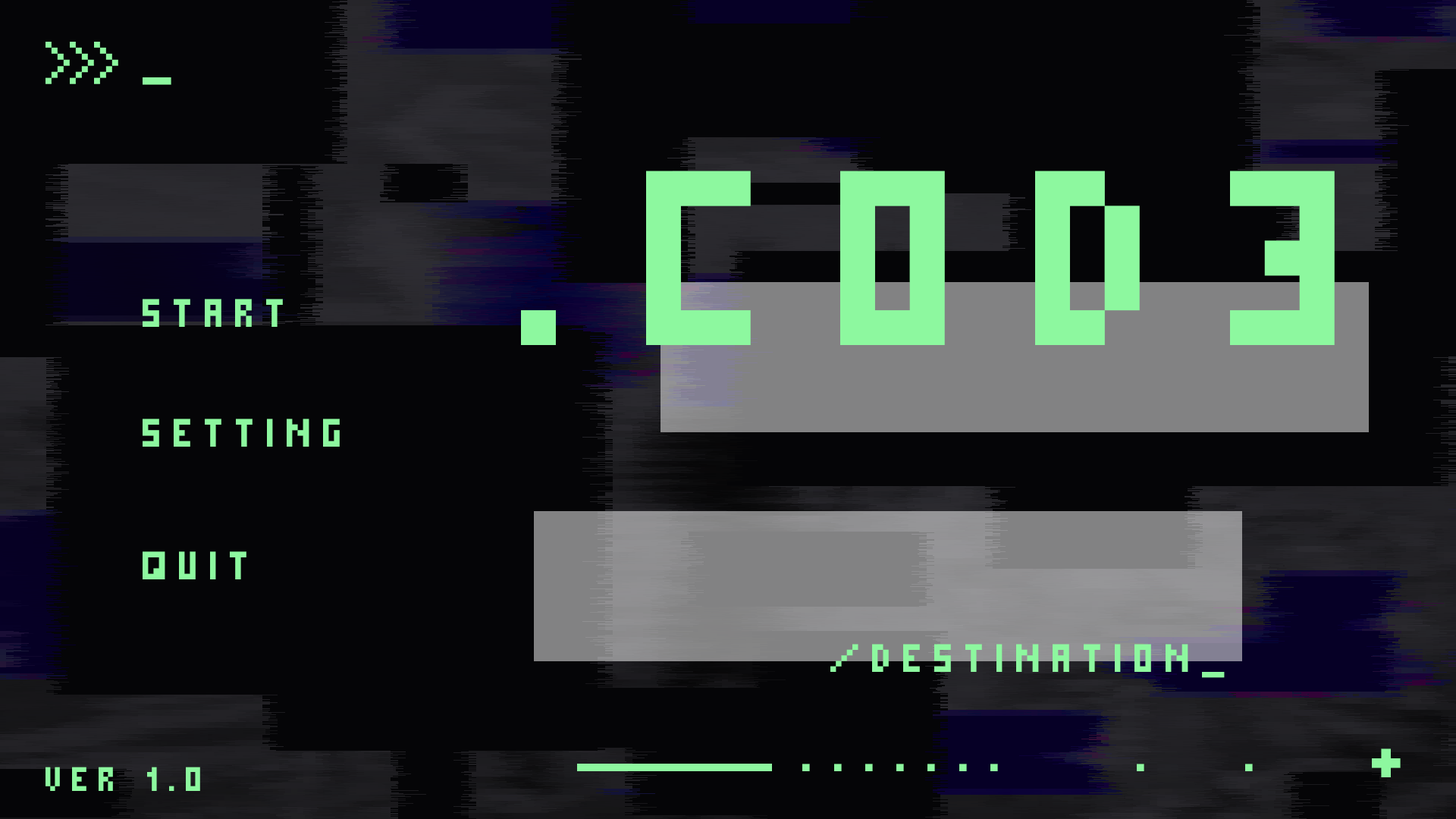
<style>
.page{position:relative;width:1456px;height:819px;background:#050507}
.page>*{position:absolute;margin:0}
.t1{font:56.9px "PixelMillennium";letter-spacing:0.2em;color:#8df89f}
.t2{font:278.1px "PixelMillennium";letter-spacing:0.2em;color:#8df89f}
.t3{font:44.2px "PixelMillennium";letter-spacing:0.2em;color:#8df89f}
.t4{font:75.8px "PixelMillennium";letter-spacing:0.2em;color:#8df89f}
.t5{font:37.9px "PixelMillennium";letter-spacing:0.2em;color:#8df89f}
.t6{font:56.9px "PixelMillennium";letter-spacing:0.3em;color:#8df89f}
</style>
<div class="page">
<p class="t1" style="left:143px;top:77px;width:28px;height:8px">_</p>
<p class="t2" style="left:521px;top:171px;width:814px;height:174px">.C0D3</p>
<p class="t3" style="left:143px;top:299px;width:140px;height:28px">START</p>
<p class="t3" style="left:143px;top:419px;width:197px;height:28px">SETTING</p>
<p class="t3" style="left:143px;top:551px;width:103px;height:28px">QUIT</p>
<p class="t3" style="left:830px;top:644px;width:395px;height:34px">/DESTINATION_</p>
<p class="t4" style="left:1372px;top:748px;width:29px;height:29px">+</p>
<p class="t5" style="left:45px;top:767px;width:155px;height:24px">VER 1.0</p>
<p class="t6" style="left:802px;top:764px;width:451px;height:7px">.......   .  .</p>
</div>
